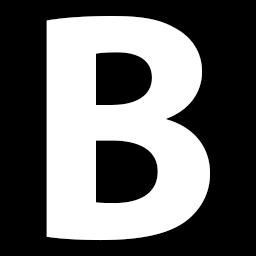
<style>
.page{position:relative;width:256px;height:256px;background:#000000}
.page>*{position:absolute;margin:0}
.t1{font:326.7px "MyriadPro-Bold";color:#ffffff}
</style>
<div class="page">
<p class="t1" style="left:46px;top:16px;width:164px;height:225px">B</p>
</div>
